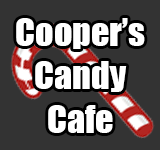
<style>
.page{position:relative;width:160px;height:150px;background:#333333}
.page>*{position:absolute;margin:0}
.t1{font:36px "Impact";color:#ffffff}
</style>
<div class="page">
<p class="t1" style="left:16px;top:18px;width:129px;height:115px;text-align:center">Cooper’s<br>Candy<br>Cafe</p>
</div>
